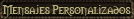
<style>
.page{position:relative;width:134px;height:19px}
.page>*{position:absolute;margin:0}
.t1{font:12px "Morpheus";color:#b9b27c}
</style>
<div class="page">
<p class="t1" style="left:2px;top:5px;width:129px;height:12px">Mensajes Personalizados</p>
</div>
